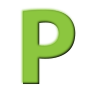
<style>
.page{position:relative;width:90px;height:90px;background:#ffffff}
.page>*{position:absolute;margin:0}
.t1{font:108px "MyriadHebrew-Bold";color:#8cc63f}
</style>
<div class="page">
<p class="t1" style="left:23px;top:9px;width:53px;height:75px">P</p>
</div>
